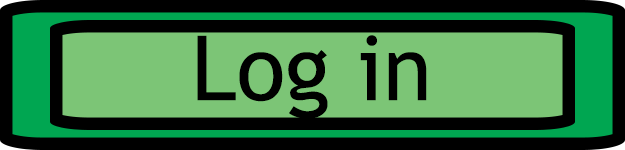
<style>
.page{position:relative;width:625px;height:150px;background:#7cc576}
.page>*{position:absolute;margin:0}
.t1{font:90px "TrebuchetMS";color:#000000}
</style>
<div class="page">
<p class="t1" style="left:197px;top:35px;width:230px;height:84px">Log in</p>
</div>
